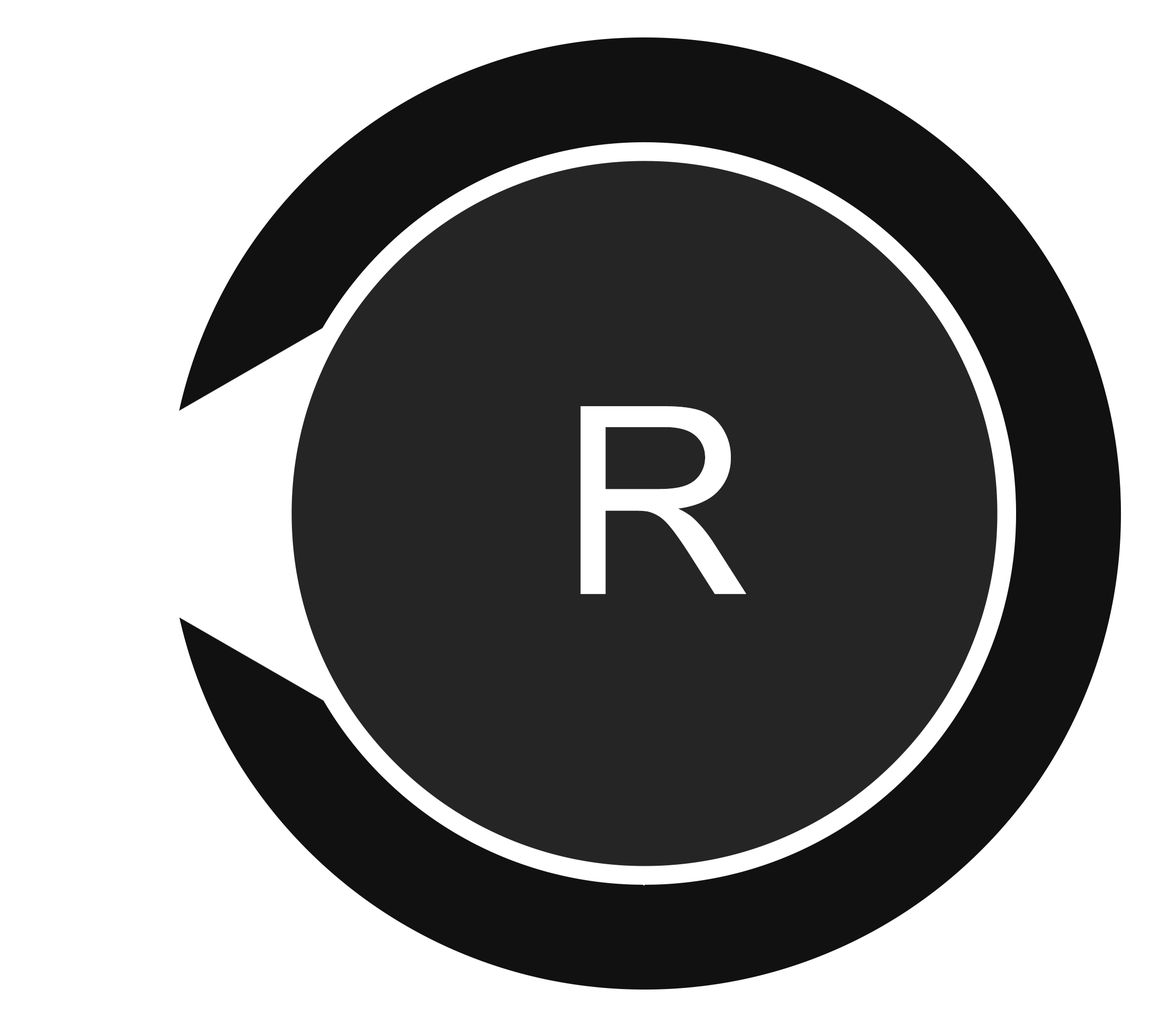
<style>
.page{position:relative;width:1161px;height:1027px;background:#ffffff}
.page>*{position:absolute;margin:0}
.t1{font:262.3px "ArialMT";color:#ffffff}
</style>
<div class="page">
<p class="t1" style="left:580px;top:406px;width:166px;height:188px">R</p>
</div>
